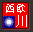
<style>
.page{position:relative;width:33px;height:32px;background:#f20000}
.page>*{position:absolute;margin:0}
.t1{font:10.4px "SimSun";color:#ffffff}
.t2{font:11.7px "SimSun";color:#ffffff}
</style>
<div class="page">
<p class="t1" style="left:6px;top:4px;width:19px;height:9px">西欧</p>
<p class="t2" style="left:16px;top:15px;width:11px;height:12px">川</p>
</div>
